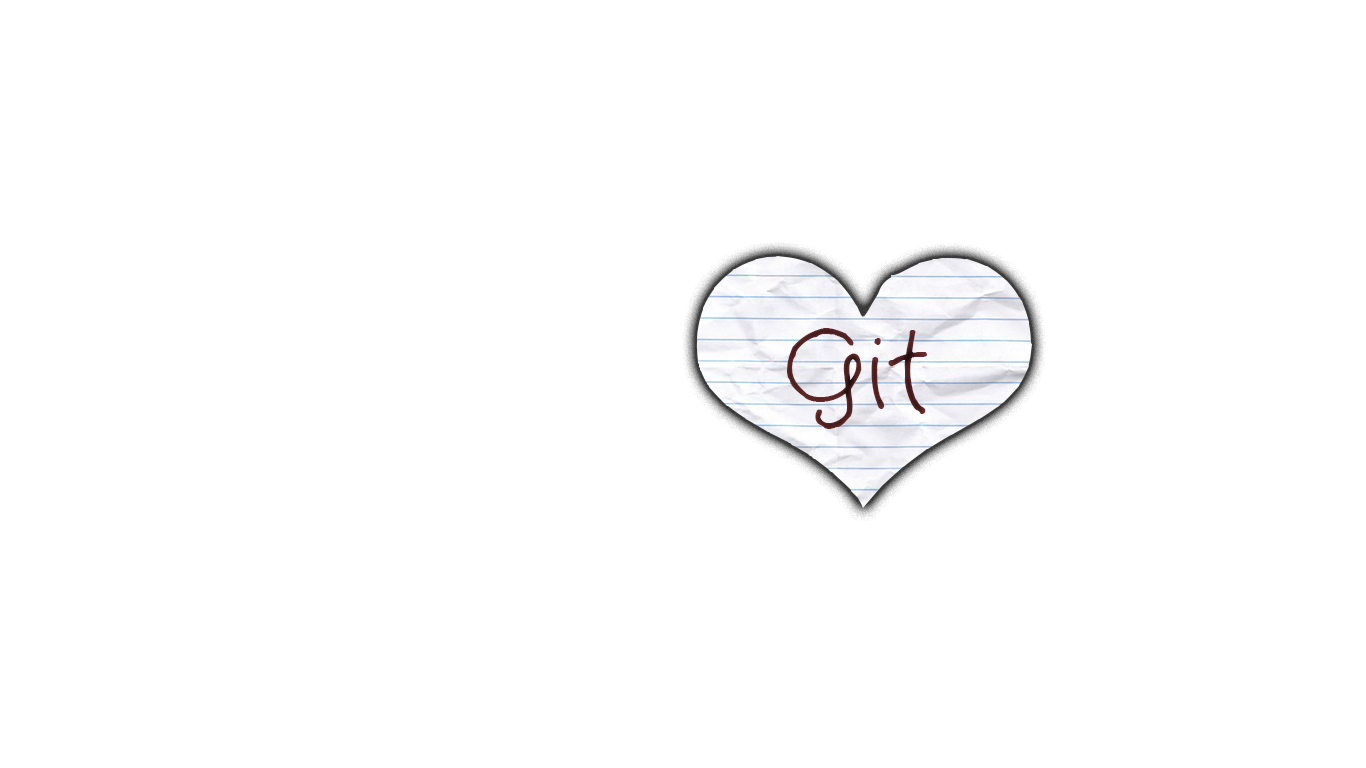
<style>
.page{position:relative;width:1366px;height:768px;background:#ffffff}
.page>*{position:absolute;margin:0}
.t1{font:100.5px "CraftyGirls";color:#522222}
</style>
<div class="page">
<p class="t1" style="left:786px;top:328px;width:141px;height:101px">Git</p>
</div>
